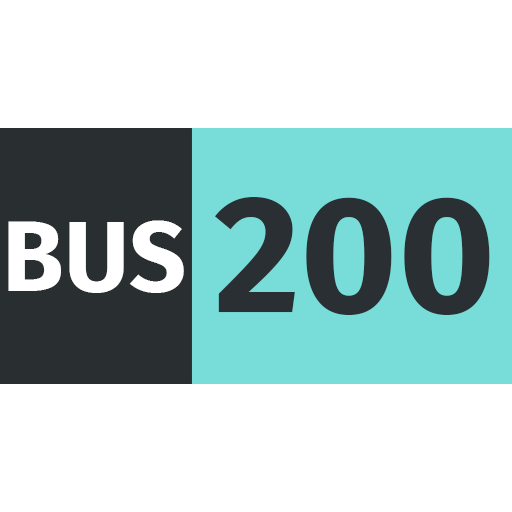
<style>
.page{position:relative;width:512px;height:512px;background:#ffffff}
.page>*{position:absolute;margin:0}
.t1{font:166.7px "FiraSans-Bold";color:#292f33}
.t2{font:100px "FiraSans-Bold";color:#ffffff}
</style>
<div class="page">
<p class="t1" style="left:215px;top:197px;width:275px;height:118px">200</p>
<p class="t2" style="left:8px;top:220px;width:176px;height:73px">BUS</p>
</div>
